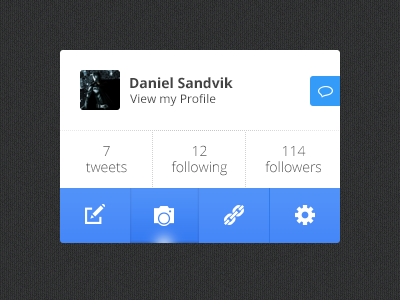
<style>
.page{position:relative;width:400px;height:300px;background:#ffffff}
.page>*{position:absolute;margin:0}
.t1{font:14px "OpenSans-Bold";color:#434343}
.t2{font:12px "OpenSans";color:#434343}
.t3{font:14px "OpenSans-Light"}
</style>
<div class="page">
<p class="t1" style="left:130px;top:77px;width:103px;height:12px">Daniel Sandvik</p>
<p class="t2" style="left:130px;top:94px;width:86px;height:12px">View my Profile</p>
<p class="t3" style="left:86px;top:146px;width:41px;height:27px;text-align:center">7<br>tweets</p>
<p class="t3" style="left:171px;top:145px;width:56px;height:31px;text-align:center">12<br>following</p>
<p class="t3" style="left:265px;top:146px;width:56px;height:27px;text-align:center">114<br>followers</p>
</div>
